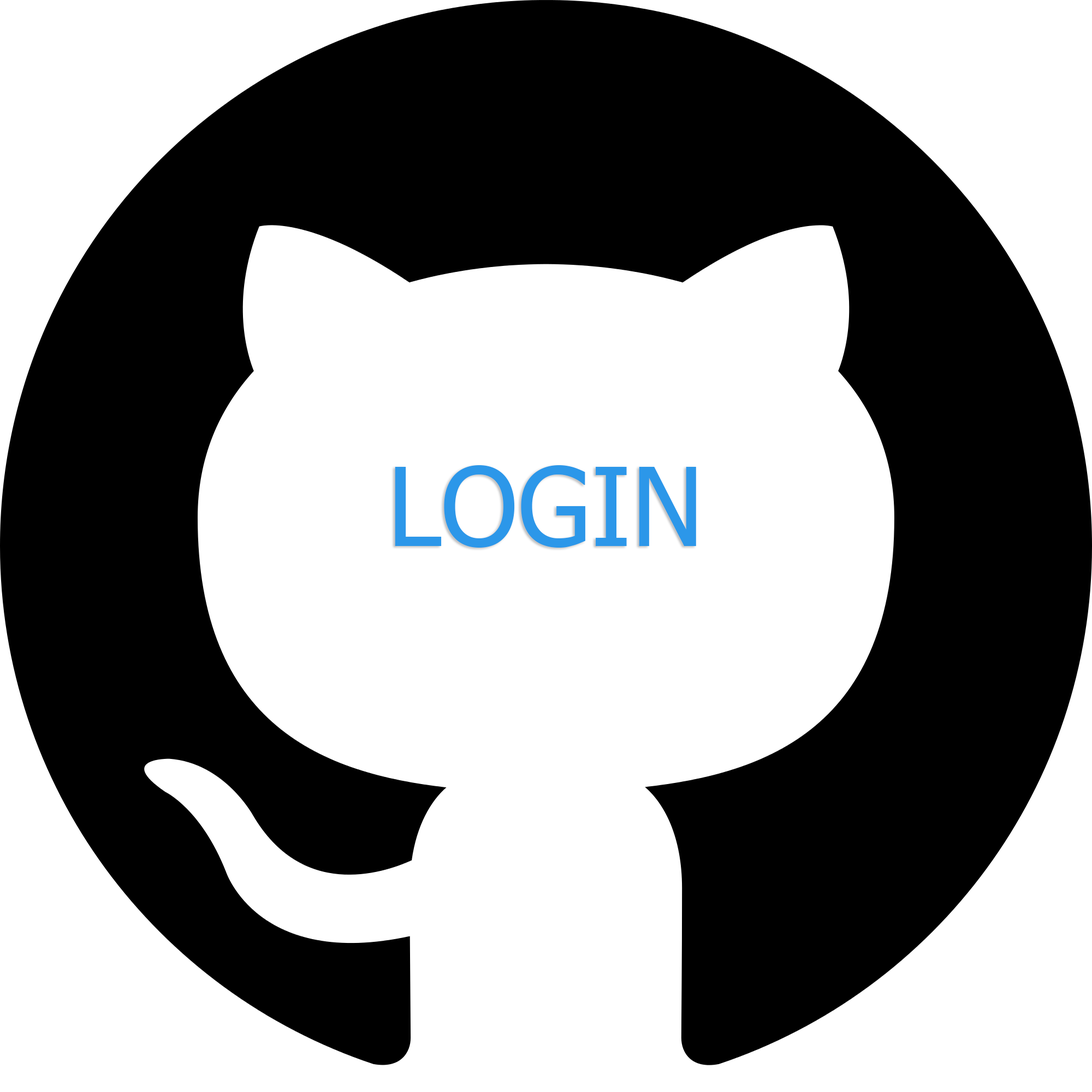
<style>
.page{position:relative;width:1092px;height:1092px;background:#ffffff}
.page>*{position:absolute;margin:0}
.t1{font:109.2px "Tahoma";color:#2c97e9}
</style>
<div class="page">
<p class="t1" style="left:395px;top:465px;width:301px;height:83px">LOGIN</p>
</div>
